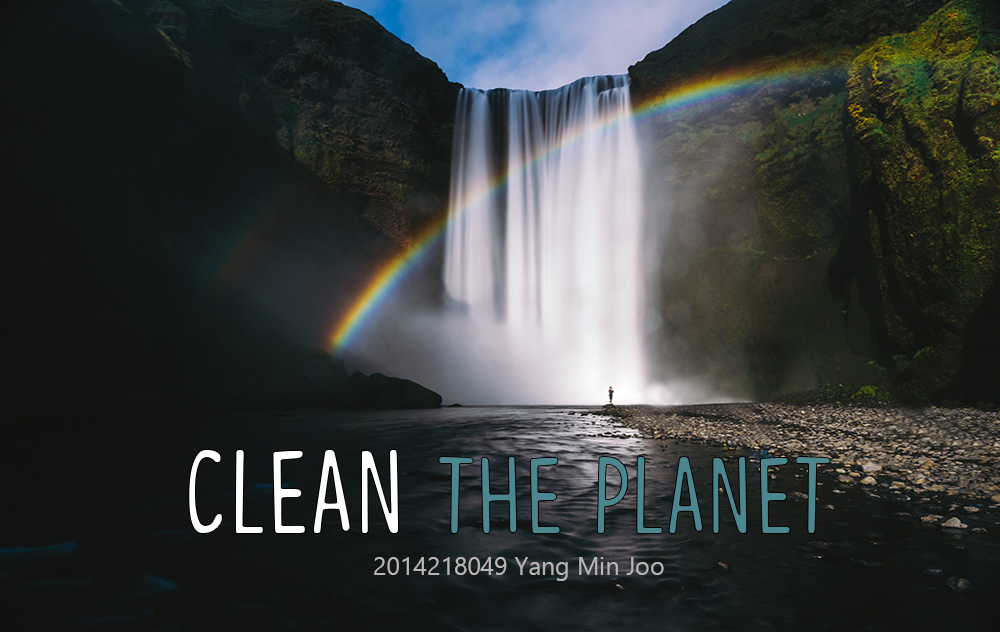
<style>
.page{position:relative;width:1000px;height:632px}
.page>*{position:absolute;margin:0}
.t1{font:110px "CongratulationsDEMO";color:#4c868f}
.t2{font:120px "CongratulationsDEMO";color:#ffffff}
.t3{font:25px "SegoeUIHistoric";color:#bbb4b4}
</style>
<div class="page">
<p class="t1" style="left:188px;top:448px;width:643px;height:87px"><span class="t2">clean </span>the planet</p>
<p class="t3" style="left:374px;top:557px;width:290px;height:24px">2014218049 Yang Min Joo</p>
</div>
